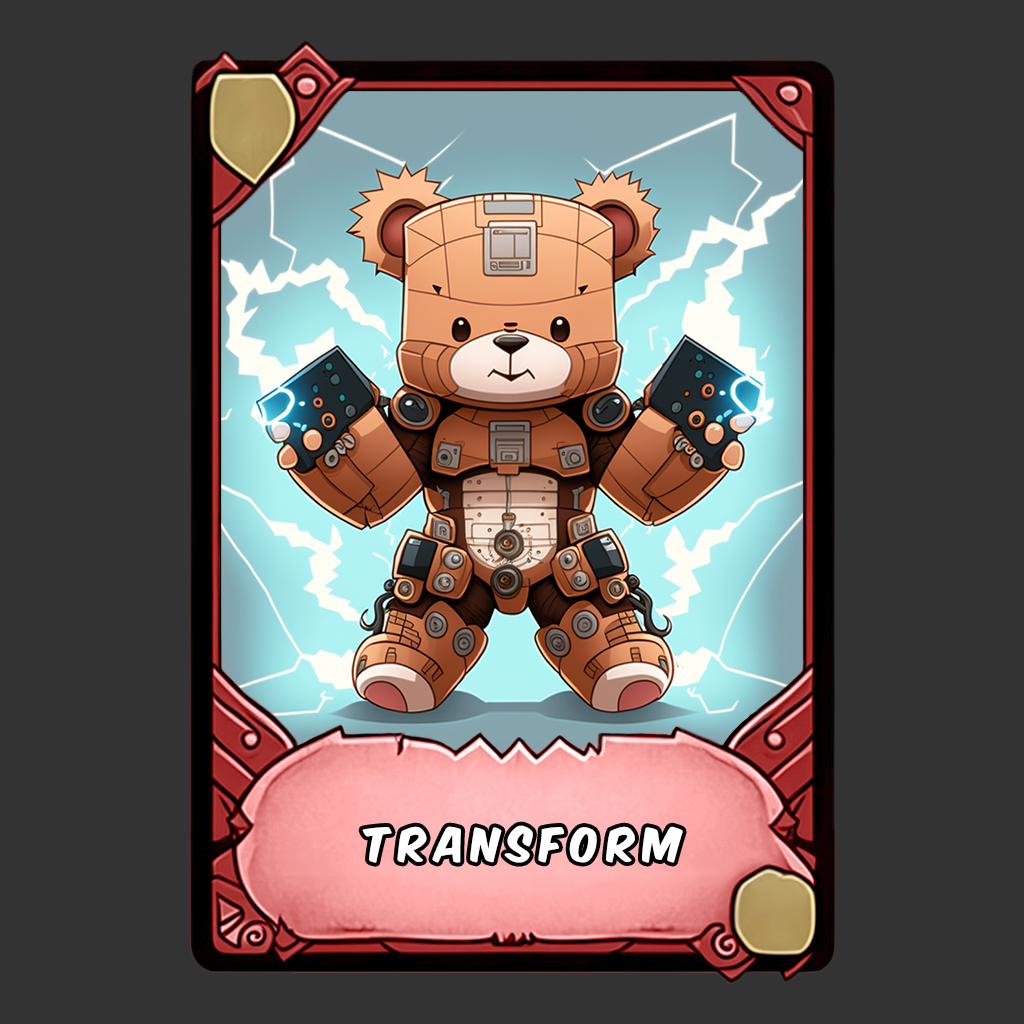
<style>
.page{position:relative;width:1024px;height:1024px;background:#333333}
.page>*{position:absolute;margin:0}
.t1{font:40px "KomikaAxis";letter-spacing:0.2em;color:#ffffff}
</style>
<div class="page">
<p class="t1" style="left:362px;top:825px;width:321px;height:38px">transform</p>
</div>
